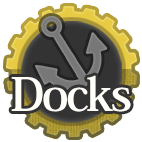
<style>
.page{position:relative;width:142px;height:142px;background:#ffffff}
.page>*{position:absolute;margin:0}
.t1{font:48px "HeiseiMinStd-W7";letter-spacing:-0.04em;color:#fffef9}
</style>
<div class="page">
<p class="t1" style="left:11px;top:75px;width:120px;height:37px">Docks</p>
</div>
